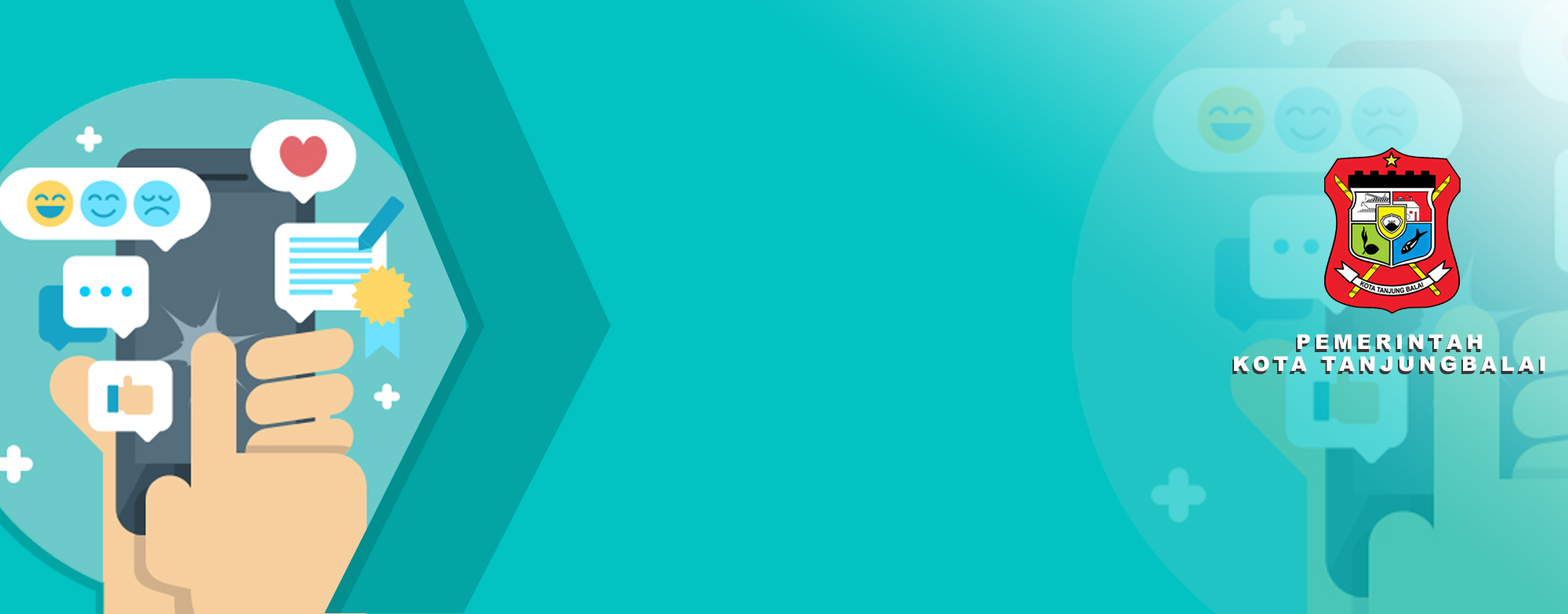
<style>
.page{position:relative;width:1568px;height:614px;background:#02c2c2}
.page>*{position:absolute;margin:0}
.t1{font:20.5px/21.7px "Arial-Black";letter-spacing:0.2em}
.t2{font:20.5px/21.7px "Arial-Black";letter-spacing:0.2em;color:#ffffff}
</style>
<div class="page">
<p class="t1" style="left:1232px;top:337px;width:312px;height:38px;text-align:center">PEMERINTAH<br>KOTA TANJUNGBALAI</p>
<p class="t2" style="left:1234px;top:334px;width:311px;height:38px;text-align:center">PEMERINTAH<br>KOTA TANJUNGBALAI</p>
</div>
